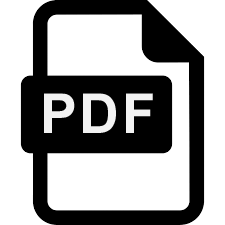
<style>
.page{position:relative;width:225px;height:225px;background:#ffffff}
.page>*{position:absolute;margin:0}
.t1{font:55px "Arial-BoldMT";letter-spacing:0.05em;color:#f2f2f2}
</style>
<div class="page">
<p class="t1" style="left:44px;top:93px;width:109px;height:40px">PDF</p>
</div>
